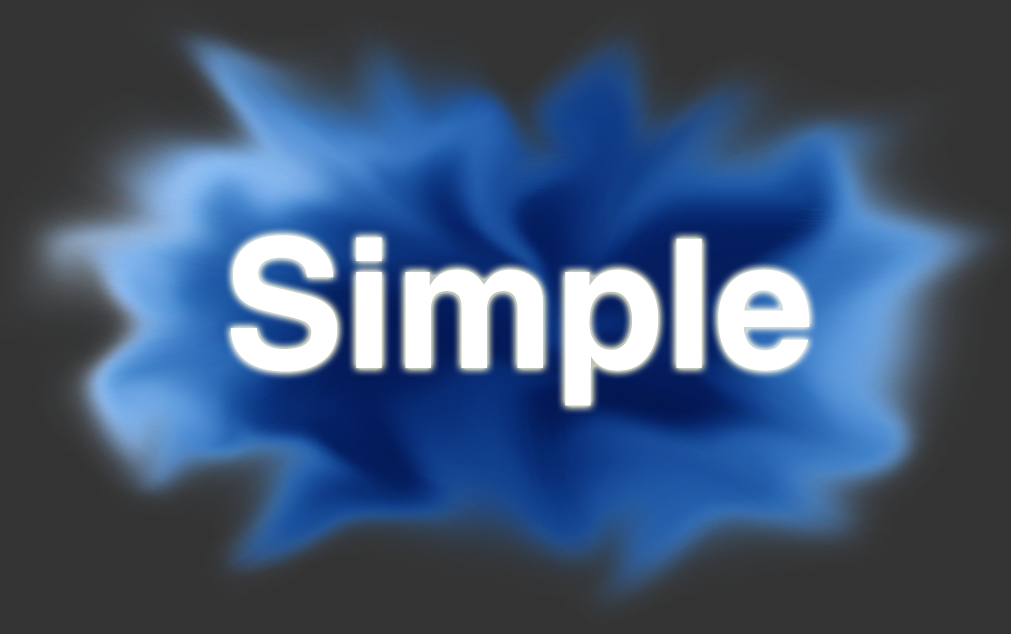
<style>
.page{position:relative;width:1011px;height:634px;background:#333333}
.page>*{position:absolute;margin:0}
.t1{font:180px "Sanskrit-HelveticaBold";color:#ffffff}
</style>
<div class="page">
<p class="t1" style="left:231px;top:235px;width:579px;height:171px">Simple</p>
</div>
